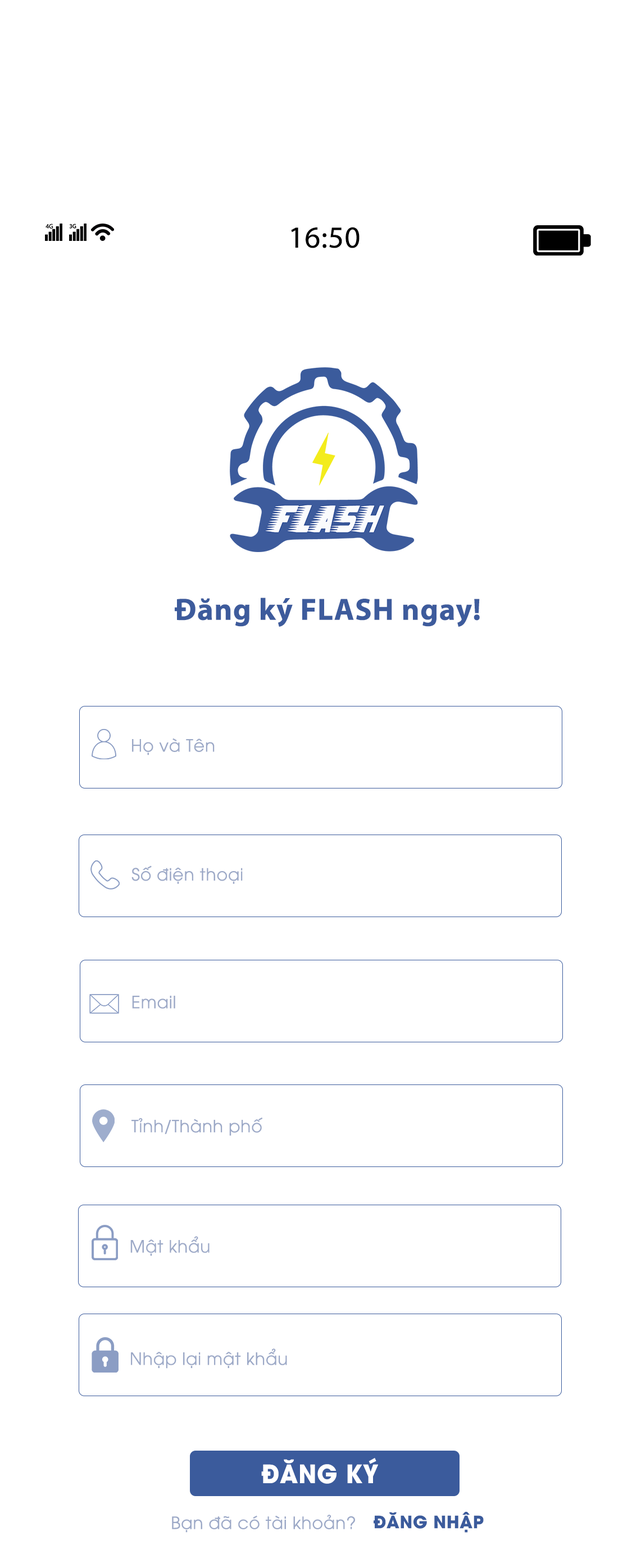
<style>
.page{position:relative;width:632px;height:1568px;background:#ffffff}
.page>*{position:absolute;margin:0}
.t1{font:30.5px "MyriadPro-Regular";letter-spacing:0.025em;color:#000000}
.t2{font:30.8px "MyriadPro-Bold";letter-spacing:0.025em;color:#3d5b9c}
.t3{font:16.8px "UTM-Avo";letter-spacing:0.025em;color:#9ca9c7}
.t4{font:25px "UTMAvoBold";letter-spacing:0.025em;color:#ffffff;scale:0.94 1}
.t5{font:16.8px "UTMAvoBold";letter-spacing:0.025em;color:#3b5b9c}
</style>
<div class="page">
<p class="t1" style="left:291px;top:227px;width:68px;height:21px">16:50</p>
<p class="t2" style="left:175px;top:598px;width:305px;height:29px">Đăng ký FLASH ngay!</p>
<p class="t3" style="left:132px;top:738px;width:83px;height:17px">Họ và Tên</p>
<p class="t3" style="left:131px;top:865px;width:112px;height:19px">Số điện thoại</p>
<p class="t3" style="left:132px;top:996px;width:43px;height:13px">Email</p>
<p class="t3" style="left:131px;top:1117px;width:132px;height:19px">Tỉnh/Thành phố</p>
<p class="t3" style="left:130px;top:1236px;width:79px;height:20px">Mật khẩu</p>
<p class="t3" style="left:131px;top:1348px;width:156px;height:21px">Nhập lại mật khẩu</p>
<p class="t4" style="left:261px;top:1458px;width:117px;height:26px">ĐĂNG KÝ</p>
<p class="t3" style="left:172px;top:1515px;width:183px;height:18px">Bạn đã có tài khoản?</p>
<p class="t5" style="left:373px;top:1512px;width:111px;height:21px">ĐĂNG NHẬP</p>
</div>
